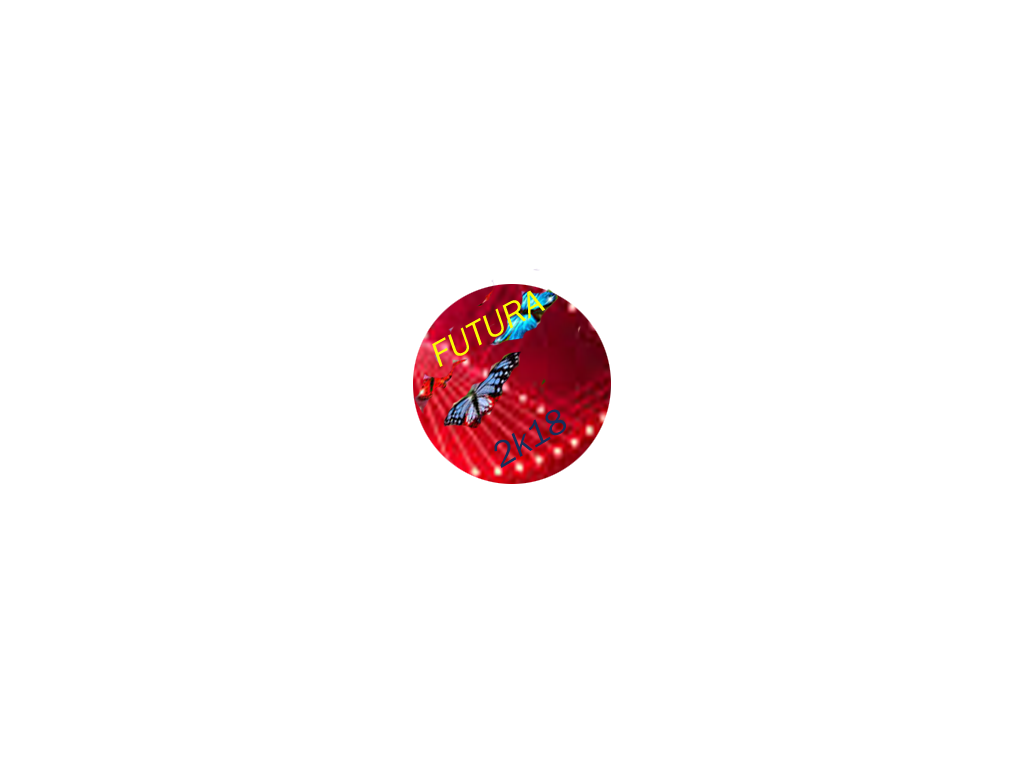
<style>
.page{position:relative;width:1024px;height:768px;background:#ffffff}
.page>*{position:absolute;margin:0}
.t1{font:36px "FranklinGothic-BookItalic";color:#f9fc05}
.t2{font:36px "FranklinGothic-BookItalic";color:#182e5a}
</style>
<div class="page">
<p class="t1" style="left:432px;top:290px;width:113px;height:77px;rotate:-29deg">FUTURA</p>
<p class="t2" style="left:494px;top:409px;width:72px;height:59px;rotate:-31deg">2k18</p>
</div>
